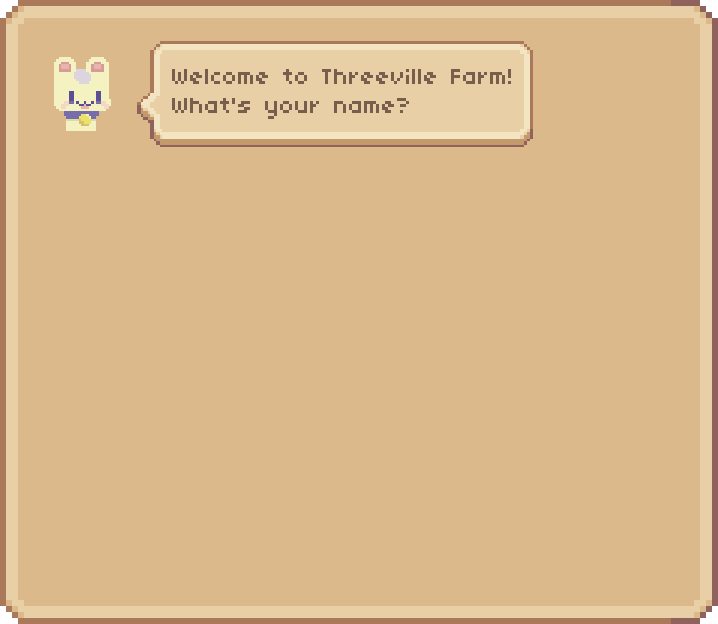
<style>
.page{position:relative;width:718px;height:624px;background:#dcb98a}
.page>*{position:absolute;margin:0}
.t1{font:24px "04b03";color:#785e4d}
</style>
<div class="page">
<p class="t1" style="left:172px;top:69px;width:339px;height:50px">Welcome to Threeville Farm!<br>What's your name?</p>
</div>
